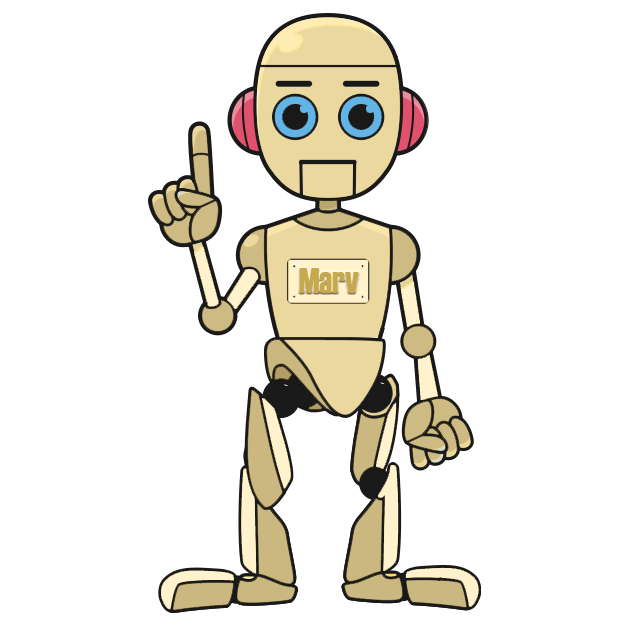
<style>
.page{position:relative;width:627px;height:627px;background:#ffffff}
.page>*{position:absolute;margin:0}
.t1{font:36px "Haettenschweiler";color:#c6a84d}
</style>
<div class="page">
<p class="t1" style="left:299px;top:268px;width:60px;height:25px">Marv</p>
</div>
